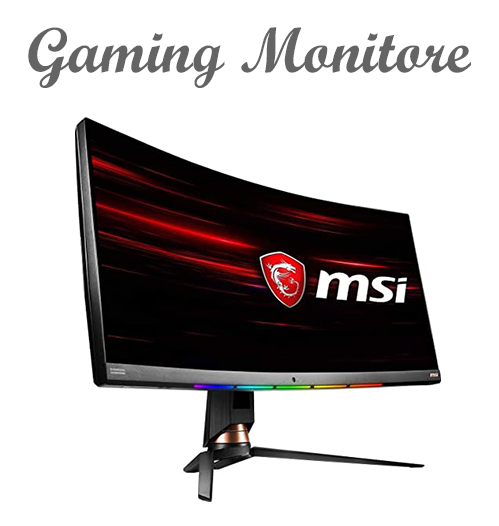
<style>
.page{position:relative;width:499px;height:526px;background:#ffffff}
.page>*{position:absolute;margin:0}
.t1{font:64px "ScriptMTBold";color:#656464}
</style>
<div class="page">
<p class="t1" style="left:28px;top:27px;width:443px;height:61px">Gaming Monitore</p>
</div>
